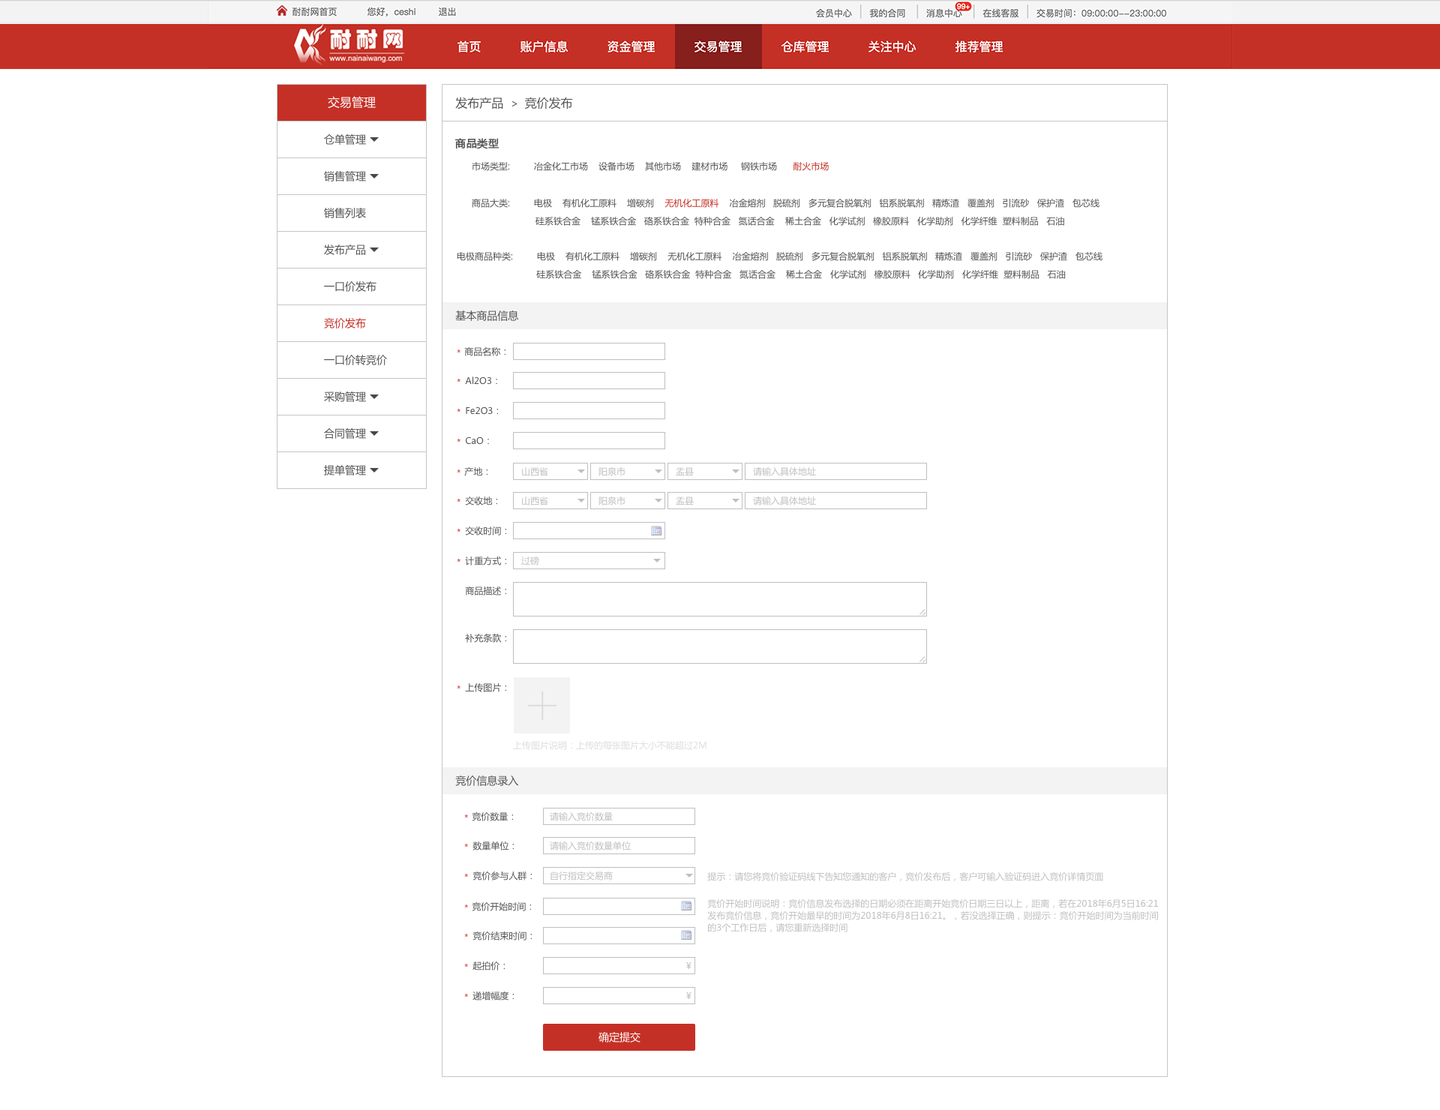
<style>
.page{position:relative;width:1440px;height:1110px;background:#ffffff}
.page>*{position:absolute;margin:0}
.t1{font:12px "MicrosoftYaHei";color:#ffffff}
.t2{font:12px "MicrosoftYaHei";color:#535353}
.t3{font:10.5px "MicrosoftYaHei";color:#535353}
.t4{font:10.5px "MicrosoftYaHei";color:#535353;font-weight:bold}
.t5{font:9px "MicrosoftYaHei";color:#535353}
.t6{font:9px "MicrosoftYaHei";color:#c53026}
.t7{font:9px/18px "MicrosoftYaHei";color:#535353}
.t8{font:9px/18px "MicrosoftYaHei";color:#c53026}
.t9{font:10.5px "MicrosoftYaHei";color:#c53026}
.t10{font:9px "MicrosoftYaHei"}
.t11{font:9px "MicrosoftYaHei";color:#bfbfbf}
.t12{font:9px "MicrosoftYaHei";color:#dddddd}
.t13{font:9px/12px "MicrosoftYaHei";color:#bfbfbf}
.t14{font:10.5px "MicrosoftYaHei";color:#ffffff}
</style>
<div class="page">
<p class="t1" style="left:328px;top:96px;width:48px;height:13px">交易管理</p>
<p class="t2" style="left:455px;top:97px;width:118px;height:13px">发布产品  <span class="t3">&gt;  </span>竞价发布</p>
<p class="t3" style="left:324px;top:134px;width:42px;height:11px">仓单管理</p>
<p class="t4" style="left:454px;top:138px;width:45px;height:11px">商品类型</p>
<p class="t3" style="left:324px;top:171px;width:42px;height:11px">销售管理</p>
<p class="t5" style="left:472px;top:162px;width:357px;height:9px">市场类型:         冶金化工市场    设备市场    其他市场    建材市场     钢铁市场      <span class="t6">耐火市场</span></p>
<p class="t3" style="left:324px;top:208px;width:42px;height:10px">销售列表</p>
<p class="t7" style="left:472px;top:199px;width:628px;height:27px">商品大类:         电极    有机化工原料    增碳剂    <span class="t8">无机化工原料</span>    冶金熔剂   脱硫剂   多元复合脱氧剂   铝系脱氧剂   精炼渣   覆盖剂   引流砂   保护渣   包芯线 <br>                        硅系铁合金    锰系铁合金   硌系铁合金  特种合金   氮话合金    稀土合金   化学试剂   橡胶原料   化学助剂   化学纤维  塑料制品   石油</p>
<p class="t3" style="left:324px;top:244px;width:42px;height:11px">发布产品</p>
<p class="t7" style="left:457px;top:252px;width:645px;height:27px">电极商品种类:         电极    有机化工原料    增碳剂    无机化工原料    冶金熔剂   脱硫剂   多元复合脱氧剂   铝系脱氧剂   精炼渣   覆盖剂   引流砂   保护渣   包芯线 <br>                              硅系铁合金    锰系铁合金   硌系铁合金  特种合金   氮话合金    稀土合金   化学试剂   橡胶原料   化学助剂   化学纤维  塑料制品   石油</p>
<p class="t3" style="left:324px;top:281px;width:52px;height:11px">一口价发布</p>
<p class="t9" style="left:324px;top:318px;width:42px;height:10px">竞价发布</p>
<p class="t3" style="left:455px;top:310px;width:64px;height:11px">基本商品信息</p>
<p class="t10" style="left:457px;top:349px;width:3px;height:4px">*</p>
<p class="t5" style="left:464px;top:347px;width:42px;height:9px">商品名称：</p>
<p class="t3" style="left:324px;top:355px;width:63px;height:10px">一口价转竞价</p>
<p class="t5" style="left:465px;top:376px;width:32px;height:9px">Al2O3：</p>
<p class="t10" style="left:457px;top:378px;width:3px;height:4px">*</p>
<p class="t3" style="left:324px;top:392px;width:42px;height:10px">采购管理</p>
<p class="t10" style="left:457px;top:408px;width:3px;height:4px">*</p>
<p class="t5" style="left:466px;top:406px;width:32px;height:9px">Fe2O3：</p>
<p class="t3" style="left:324px;top:428px;width:42px;height:11px">合同管理</p>
<p class="t10" style="left:457px;top:438px;width:3px;height:4px">*</p>
<p class="t5" style="left:465px;top:436px;width:24px;height:9px">CaO：</p>
<p class="t3" style="left:324px;top:465px;width:42px;height:11px">提单管理</p>
<p class="t10" style="left:457px;top:469px;width:3px;height:4px">*</p>
<p class="t5" style="left:464px;top:467px;width:24px;height:9px">产地：</p>
<p class="t11" style="left:522px;top:467px;width:26px;height:9px">山西省</p>
<p class="t11" style="left:598px;top:467px;width:28px;height:9px">阳泉市</p>
<p class="t11" style="left:676px;top:467px;width:18px;height:9px">盂县</p>
<p class="t11" style="left:753px;top:467px;width:63px;height:9px">请输入具体地址</p>
<p class="t5" style="left:465px;top:496px;width:32px;height:10px">交收地：</p>
<p class="t11" style="left:522px;top:496px;width:26px;height:10px">山西省</p>
<p class="t11" style="left:598px;top:496px;width:28px;height:10px">阳泉市</p>
<p class="t11" style="left:676px;top:496px;width:18px;height:10px">盂县</p>
<p class="t11" style="left:753px;top:496px;width:63px;height:10px">请输入具体地址</p>
<p class="t10" style="left:457px;top:498px;width:3px;height:4px">*</p>
<p class="t10" style="left:457px;top:528px;width:3px;height:4px">*</p>
<p class="t5" style="left:465px;top:526px;width:41px;height:10px">交收时间：</p>
<p class="t10" style="left:457px;top:558px;width:3px;height:4px">*</p>
<p class="t5" style="left:465px;top:556px;width:41px;height:10px">计重方式：</p>
<p class="t11" style="left:521px;top:556px;width:18px;height:10px">过磅</p>
<p class="t5" style="left:465px;top:586px;width:41px;height:10px">商品描述：</p>
<p class="t5" style="left:465px;top:634px;width:41px;height:9px">补充条款：</p>
<p class="t10" style="left:457px;top:685px;width:3px;height:4px">*</p>
<p class="t5" style="left:465px;top:683px;width:41px;height:9px">上传图片：</p>
<p class="t12" style="left:513px;top:740px;width:193px;height:10px">上传图片说明：上传的每张图片大小不能超过2M</p>
<p class="t3" style="left:455px;top:776px;width:63px;height:10px">竞价信息录入</p>
<p class="t10" style="left:464px;top:814px;width:4px;height:4px">*</p>
<p class="t5" style="left:472px;top:812px;width:41px;height:9px">竞价数量：</p>
<p class="t11" style="left:550px;top:812px;width:63px;height:9px">请输入竞价数量</p>
<p class="t10" style="left:464px;top:843px;width:4px;height:5px">*</p>
<p class="t5" style="left:472px;top:842px;width:42px;height:8px">数量单位：</p>
<p class="t11" style="left:550px;top:842px;width:81px;height:8px">请输入竞价数量单位</p>
<p class="t10" style="left:464px;top:873px;width:4px;height:5px">*</p>
<p class="t5" style="left:472px;top:872px;width:60px;height:8px">竞价参与人群：</p>
<p class="t11" style="left:550px;top:872px;width:63px;height:8px">自行指定交易商</p>
<p class="t11" style="left:707px;top:872px;width:396px;height:9px">提示：请您将竞价验证码线下告知您通知的客户，竞价发布后，客户可输入验证码进入竞价详情页面</p>
<p class="t10" style="left:464px;top:904px;width:4px;height:4px">*</p>
<p class="t5" style="left:472px;top:902px;width:59px;height:9px">竞价开始时间：</p>
<p class="t13" style="left:707px;top:899px;width:451px;height:33px">竞价开始时间说明：竞价信息发布选择的日期必须在距离开始竞价日期三日以上，距离，若在2018年6月5日16:21 <br>发布竞价信息，竞价开始最早的时间为2018年6月8日16:21。，若没选择正确，则提示：竞价开始时间为当前时间<br>的3个工作日后，请您重新选择时间</p>
<p class="t10" style="left:464px;top:933px;width:4px;height:5px">*</p>
<p class="t5" style="left:472px;top:932px;width:60px;height:8px">竞价结束时间：</p>
<p class="t10" style="left:464px;top:963px;width:4px;height:5px">*</p>
<p class="t5" style="left:472px;top:962px;width:33px;height:8px">起拍价：</p>
<p class="t11" style="left:686px;top:962px;width:6px;height:7px">￥</p>
<p class="t10" style="left:464px;top:993px;width:4px;height:5px">*</p>
<p class="t5" style="left:472px;top:992px;width:42px;height:8px">递增幅度：</p>
<p class="t11" style="left:686px;top:992px;width:6px;height:7px">￥</p>
<p class="t14" style="left:598px;top:1032px;width:42px;height:10px">确定提交</p>
</div>
